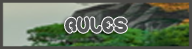
<style>
.page{position:relative;width:192px;height:49px}
.page>*{position:absolute;margin:0}
.t1{font:15px "earthheart";color:#545656}
</style>
<div class="page">
<p class="t1" style="left:65px;top:17px;width:62px;height:16px">Rules</p>
</div>
